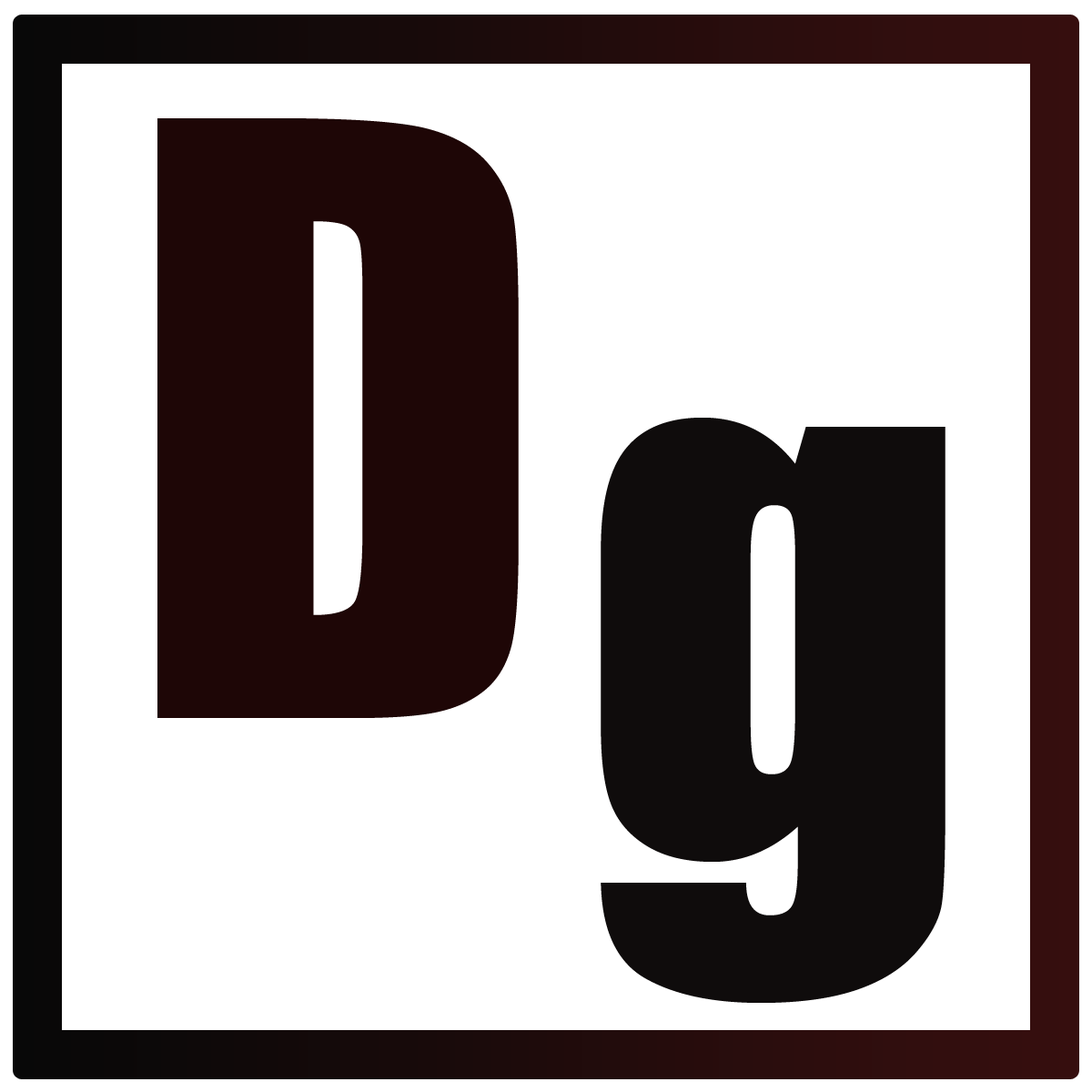
<style>
.page{position:relative;width:1092px;height:1092px;background:#ffffff}
.page>*{position:absolute;margin:0}
.t1{font:758.3px "Impact";color:#1e0606}
.t2{font:758.3px "Impact";color:#0f0c0c}
</style>
<div class="page">
<p class="t1" style="left:157px;top:118px;width:362px;height:600px">D</p>
<p class="t2" style="left:601px;top:418px;width:344px;height:585px">g</p>
</div>
